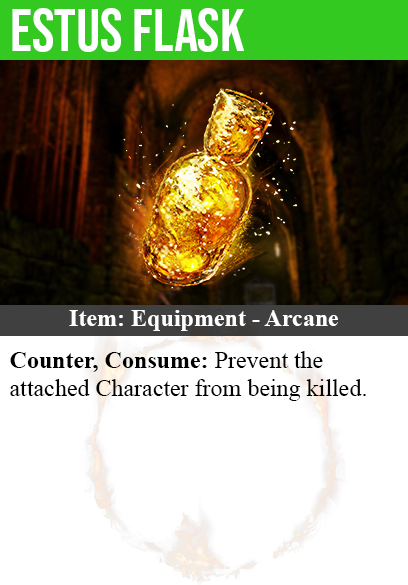
<style>
.page{position:relative;width:408px;height:585px;background:#ffffff}
.page>*{position:absolute;margin:0}
.t1{font:60px "BebasNeue-Regular";color:#ffffff}
.t2{font:24px "TimesNewRomanPS-BoldMT";color:#ffffff}
.t3{font:24px "TimesNewRomanPSMT";color:#000000}
.t4{font:24px "TimesNewRomanPS-BoldMT";color:#000000}
</style>
<div class="page">
<p class="t1" style="left:12px;top:8px;width:232px;height:44px">estus flask</p>
<p class="t2" style="left:69px;top:310px;width:269px;height:21px">Item: Equipment - Arcane</p>
<p class="t3" style="left:10px;top:351px;width:356px;height:50px"><span class="t4">Counter, Consume:</span> Prevent the<br>attached Character from being killed.</p>
</div>
